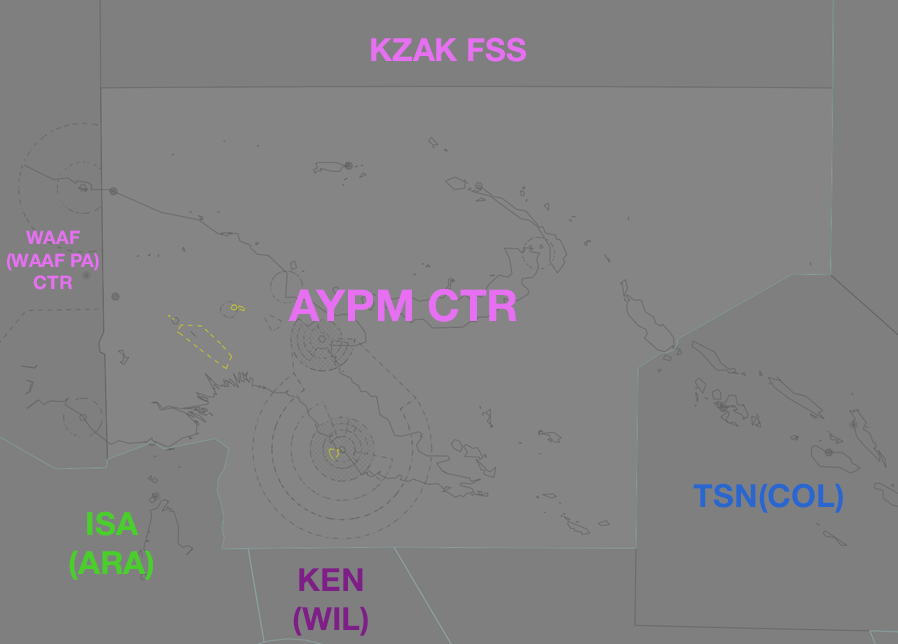
<style>
.page{position:relative;width:898px;height:644px;background:#7f7f7f}
.page>*{position:absolute;margin:0}
.t1{font:32px "HelveticaNeue-Bold";color:#e670f1}
.t2{font:18.7px "HelveticaNeue-Bold";color:#e670f1}
.t3{font:44.1px "HelveticaNeue-Bold";color:#e670f1}
.t4{font:32px "HelveticaNeue-Bold";color:#2967cf}
.t5{font:32px "HelveticaNeue-Bold";color:#48cf29}
.t6{font:32px "HelveticaNeue-Bold";color:#7e1e87}
</style>
<div class="page">
<p class="t1" style="left:371px;top:37px;width:155px;height:25px">KZAK FSS</p>
<p class="t2" style="left:7px;top:230px;width:92px;height:60px;text-align:center">WAAF<br>(WAAF PA)<br>CTR</p>
<p class="t3" style="left:288px;top:289px;width:229px;height:33px">AYPM CTR</p>
<p class="t4" style="left:693px;top:483px;width:150px;height:30px">TSN(COL)</p>
<p class="t5" style="left:69px;top:511px;width:84px;height:69px;text-align:center">ISA<br>(ARA)</p>
<p class="t6" style="left:293px;top:568px;width:75px;height:68px;text-align:center">KEN<br>(WIL)</p>
</div>
